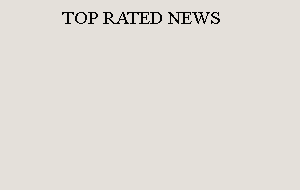
<style>
.page{position:relative;width:300px;height:190px;background:#e4e0da}
.page>*{position:absolute;margin:0}
.t1{font:18px "TimesNewRomanPSMT";color:#050504}
</style>
<div class="page">
<p class="t1" style="left:62px;top:12px;width:158px;height:12px">TOP RATED NEWS</p>
</div>
